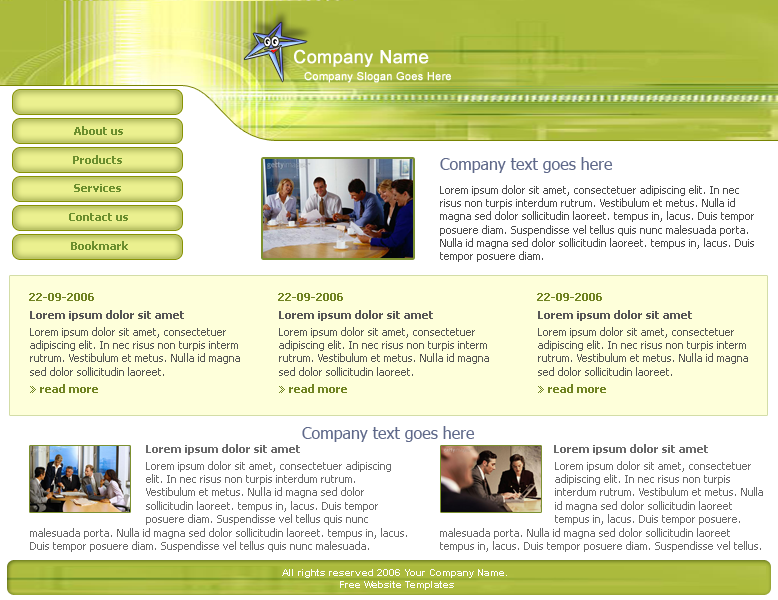
<style>
.page{position:relative;width:778px;height:600px;background:#ffffff}
.page>*{position:absolute;margin:0}
.t1{font:18px "ArialMT";color:#ffffff;font-weight:bold}
.t2{font:11px "ArialMT";color:#ffffff;font-weight:bold}
.t3{font:11px "Tahoma-Bold";color:#6b8e2e}
.t4{font:16px "Tahoma";color:#5f698a}
.t5{font:11px "Tahoma";color:#4c4c4c}
.t6{font:11px "Tahoma-Bold";color:#708322}
.t7{font:11px "Tahoma-Bold";color:#585757}
.t8{font:11px "Tahoma";color:#555655}
.t9{font:11px "Tahoma-Bold";color:#6b6b6b}
.t10{font:11px "Tahoma";color:#6a6a6a}
.t11{font:10px "Arial-BoldMT";color:#ffffff}
</style>
<div class="page">
<p class="t1" style="left:294px;top:49px;width:135px;height:18px">Company Name</p>
<p class="t2" style="left:304px;top:72px;width:147px;height:11px">Company Slogan Goes Here</p>
<p class="t3" style="left:74px;top:126px;width:49px;height:9px">About us</p>
<p class="t3" style="left:73px;top:155px;width:49px;height:9px">Products</p>
<p class="t4" style="left:440px;top:157px;width:173px;height:16px">Company text goes here</p>
<p class="t3" style="left:74px;top:184px;width:47px;height:8px">Services</p>
<p class="t5" style="left:440px;top:185px;width:314px;height:77px">Lorem ipsum dolor sit amet, consectetuer adipiscing elit. In nec <br>risus non turpis interdum rutrum. Vestibulum et metus. Nulla id <br>magna sed dolor sollicitudin laoreet. tempus in, lacus. Duis tempor <br>posuere diam. Suspendisse vel tellus quis nunc malesuada porta. <br>Nulla id magna sed dolor sollicitudin laoreet. tempus in, lacus. Duis <br>tempor posuere diam.</p>
<p class="t3" style="left:69px;top:213px;width:59px;height:8px">Contact us</p>
<p class="t3" style="left:71px;top:241px;width:57px;height:9px">Bookmark</p>
<p class="t6" style="left:29px;top:293px;width:65px;height:8px">22-09-2006</p>
<p class="t6" style="left:278px;top:293px;width:65px;height:8px">22-09-2006</p>
<p class="t6" style="left:537px;top:293px;width:65px;height:8px">22-09-2006</p>
<p class="t7" style="left:30px;top:310px;width:154px;height:11px">Lorem ipsum dolor sit amet</p>
<p class="t7" style="left:279px;top:310px;width:154px;height:11px">Lorem ipsum dolor sit amet</p>
<p class="t7" style="left:538px;top:310px;width:154px;height:11px">Lorem ipsum dolor sit amet</p>
<p class="t8" style="left:30px;top:327px;width:210px;height:49px">Lorem ipsum dolor sit amet, consectetuer <br>adipiscing elit. In nec risus non turpis interm <br>rutrum. Vestibulum et metus. Nulla id magna <br>sed dolor sollicitudin laoreet.</p>
<p class="t8" style="left:279px;top:327px;width:210px;height:49px">Lorem ipsum dolor sit amet, consectetuer <br>adipiscing elit. In nec risus non turpis interm <br>rutrum. Vestibulum et metus. Nulla id magna <br>sed dolor sollicitudin laoreet.</p>
<p class="t8" style="left:538px;top:327px;width:210px;height:49px">Lorem ipsum dolor sit amet, consectetuer <br>adipiscing elit. In nec risus non turpis interm <br>rutrum. Vestibulum et metus. Nulla id magna <br>sed dolor sollicitudin laoreet.</p>
<p class="t6" style="left:40px;top:384px;width:58px;height:9px">read more</p>
<p class="t6" style="left:289px;top:384px;width:58px;height:9px">read more</p>
<p class="t6" style="left:548px;top:384px;width:58px;height:9px">read more</p>
<p class="t4" style="left:302px;top:426px;width:173px;height:16px">Company text goes here</p>
<p class="t9" style="left:146px;top:444px;width:154px;height:11px">Lorem ipsum dolor sit amet</p>
<p class="t9" style="left:554px;top:444px;width:154px;height:11px">Lorem ipsum dolor sit amet</p>
<p class="t10" style="left:146px;top:461px;width:245px;height:64px">Lorem ipsum dolor sit amet, consectetuer adipiscing <br>elit. In nec risus non turpis interdum rutrum. <br>Vestibulum et metus. Nulla id magna sed dolor <br>sollicitudin laoreet. tempus in, lacus. Duis tempor <br>posuere diam. Suspendisse vel tellus quis nunc</p>
<p class="t10" style="left:555px;top:461px;width:208px;height:64px">Lorem ipsum dolor sit amet, consectetuer <br>adipiscing elit. In nec risus non turpis <br>interdum rutrum. Vestibulum et metus. Nulla <br>id magna sed dolor sollicitudin laoreet<br>tempus in, lacus. Duis tempor posuere.</p>
<p class="t10" style="left:30px;top:528px;width:377px;height:24px">malesuada porta. Nulla id magna sed dolor sollicitudin laoreet. tempus in, lacus. <br>Duis tempor posuere diam. Suspendisse vel tellus quis nunc malesuada.</p>
<p class="t10" style="left:440px;top:528px;width:321px;height:24px">malesuada porta. Nulla id magna sed dolor sollicitudin laoreet <br>tempus in, lacus. Duis tempor posuere diam. Suspendisse vel tellus.</p>
<p class="t11" style="left:282px;top:569px;width:225px;height:21px;text-align:center">All rights reserved 2006 Your Company Name. <br>Free Website Templates</p>
</div>
